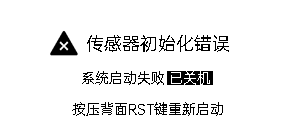
<style>
.page{position:relative;width:296px;height:128px;background:#ffffff}
.page>*{position:absolute;margin:0}
.t1{font:18px "OPPOSans-R";color:#000000}
.t2{font:14px "OPPOSans-R";color:#000000}
.t3{font:14px "OPPOSans-R";color:#ffffff}
</style>
<div class="page">
<p class="t1" style="left:87px;top:35px;width:142px;height:17px">传感器初始化错误</p>
<p class="t2" style="left:82px;top:71px;width:82px;height:14px">系统启动失败</p>
<p class="t3" style="left:171px;top:71px;width:39px;height:14px">已关机</p>
<p class="t2" style="left:72px;top:102px;width:151px;height:14px">按压背面RST键重新启动</p>
</div>
